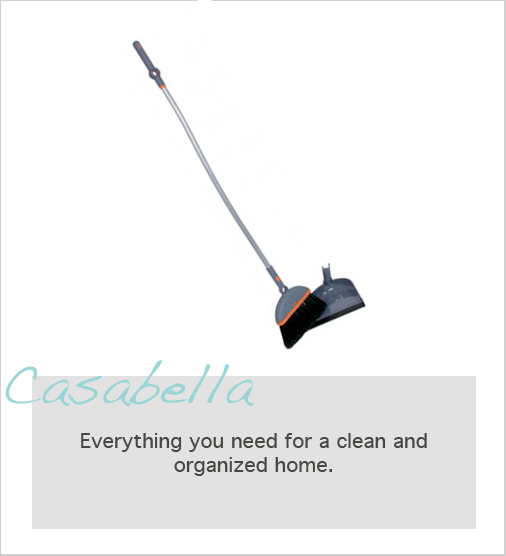
<style>
.page{position:relative;width:506px;height:556px;background:#ffffff}
.page>*{position:absolute;margin:0}
.t1{font:56px "Handwriting-Dakota";color:#9bd5d5}
.t2{font:20px "Geneva";color:#484743}
</style>
<div class="page">
<p class="t1" style="left:5px;top:360px;width:249px;height:47px">Casabella</p>
<p class="t2" style="left:81px;top:433px;width:346px;height:43px;text-align:center">Everything you need for a clean and organized home.</p>
</div>
